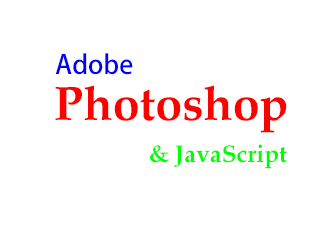
<style>
.page{position:relative;width:320px;height:240px;background:#ffffff}
.page>*{position:absolute;margin:0}
.t1{font:26px "KozGoPr6N-Medium";color:#0000ff}
.t2{font:48px "Palatino-Bold";color:#ff0000}
.t3{font:24px "Palatino-Bold";color:#00ff00}
</style>
<div class="page">
<p class="t1" style="left:55px;top:53px;width:78px;height:22px">Adobe</p>
<p class="t2" style="left:55px;top:85px;width:232px;height:48px">Photoshop</p>
<p class="t3" style="left:150px;top:144px;width:137px;height:25px">&amp; JavaScript</p>
</div>
